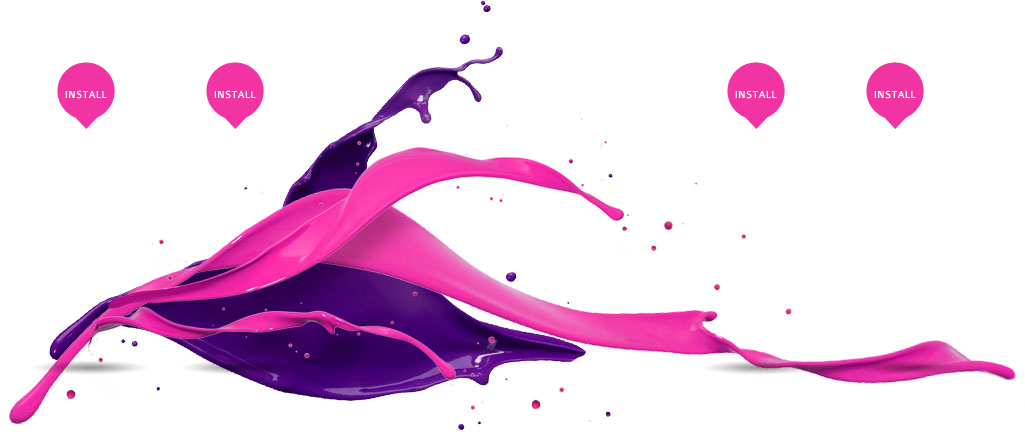
<style>
.page{position:relative;width:1025px;height:441px;background:#ffffff}
.page>*{position:absolute;margin:0}
.t1{font:11px "Colaborate-Medium";color:#ffffff}
</style>
<div class="page">
<p class="t1" style="left:65px;top:90px;width:42px;height:9px">INSTALL</p>
<p class="t1" style="left:214px;top:90px;width:42px;height:9px">INSTALL</p>
<p class="t1" style="left:735px;top:90px;width:42px;height:9px">INSTALL</p>
<p class="t1" style="left:874px;top:90px;width:42px;height:9px">INSTALL</p>
</div>
